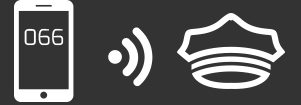
<style>
.page{position:relative;width:301px;height:105px;background:#333333}
.page>*{position:absolute;margin:0}
.t1{font:21.7px "Exo-Regular";color:#ffffff}
</style>
<div class="page">
<p class="t1" style="left:24px;top:28px;width:40px;height:18px">066</p>
</div>
